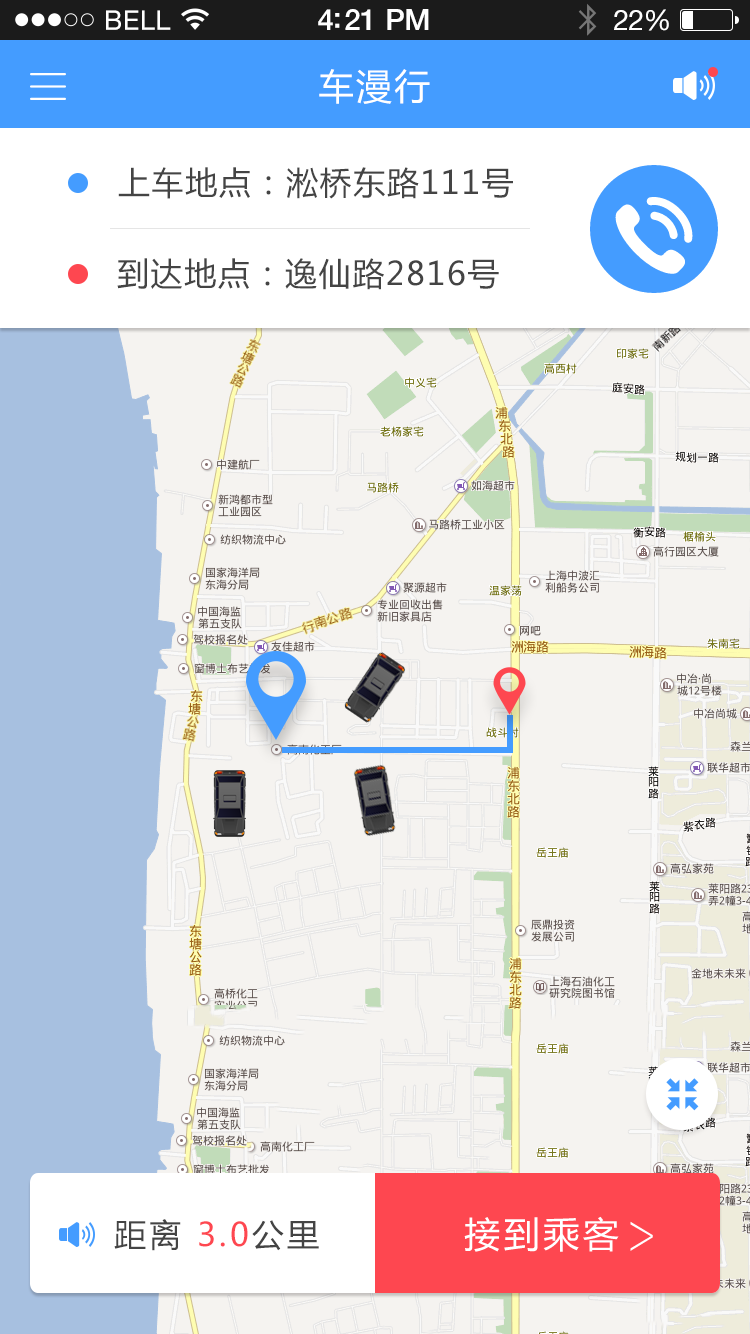
<style>
.page{position:relative;width:750px;height:1334px;background:#f5f3f0}
.page>*{position:absolute;margin:0}
.t1{font:36px "MicrosoftYaHei";letter-spacing:0.05em;color:#ffffff}
.t2{font:32px "MicrosoftYaHei";letter-spacing:0.05em;color:#444444}
.t3{font:32px "MicrosoftYaHei";letter-spacing:0.1em;color:#fe4750}
.t4{font:32px "MicrosoftYaHei";letter-spacing:0.1em;color:#444444}
</style>
<div class="page">
<p class="t1" style="left:319px;top:69px;width:111px;height:35px">车漫行</p>
<p class="t2" style="left:118px;top:167px;width:395px;height:32px">上车地点：淞桥东路111号</p>
<p class="t2" style="left:117px;top:258px;width:382px;height:32px">到达地点：逸仙路2816号</p>
<p class="t3" style="left:114px;top:1219px;width:205px;height:32px"><span class="t4">距离 </span>3.0<span class="t4">公里</span></p>
</div>
